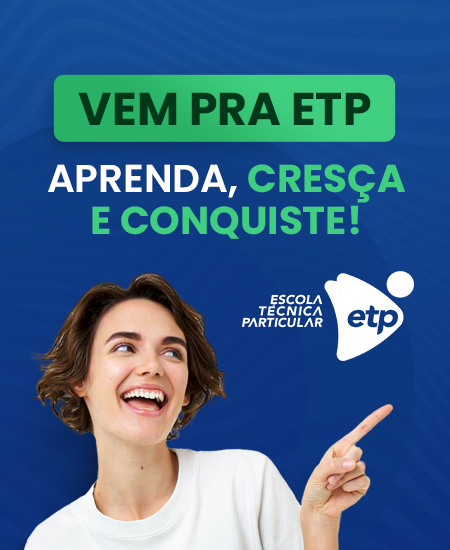
<style>
.page{position:relative;width:450px;height:550px}
.page>*{position:absolute;margin:0}
.t1{font:45.9px "Poppins-Bold";color:#003819}
.t2{font:38.8px/42.3px "Poppins-Bold";color:#40ce80}
.t3{font:38.8px/42.3px "Poppins-SemiBold";color:#ffffff}
</style>
<div class="page">
<p class="t1" style="left:78px;top:92px;width:293px;height:33px">VEM PRA ETP</p>
<p class="t2" style="left:48px;top:164px;width:357px;height:75px;text-align:center"><span class="t3">APRENDA, </span>CRESÇA<br>E CONQUISTE!</p>
</div>
